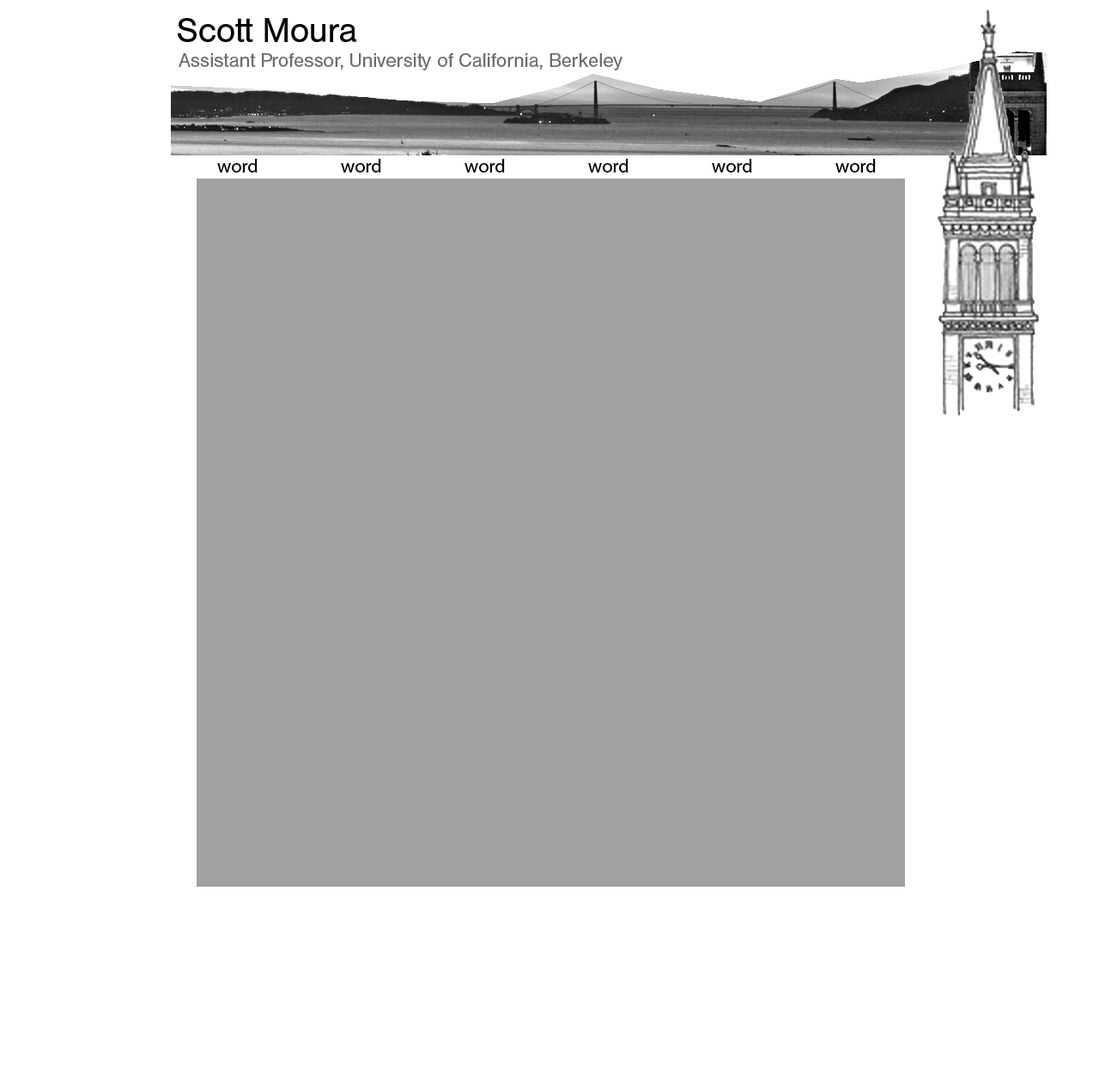
<style>
.page{position:relative;width:1099px;height:1085px;background:#ffffff}
.page>*{position:absolute;margin:0}
.t1{font:33.4px "HelveticaBQ-Roman";color:#000000}
.t2{font:19.1px "HelveticaBQ-Roman";color:#6c6c6c}
.t3{font:19.1px "MyriadPro-Regular";color:#000000}
</style>
<div class="page">
<p class="t1" style="left:178px;top:18px;width:178px;height:24px">Scott Moura</p>
<p class="t2" style="left:179px;top:53px;width:443px;height:17px">Assistant Professor, University of California, Berkeley</p>
<p class="t3" style="left:217px;top:159px;width:659px;height:14px">word   word   word   word   word   word</p>
</div>
